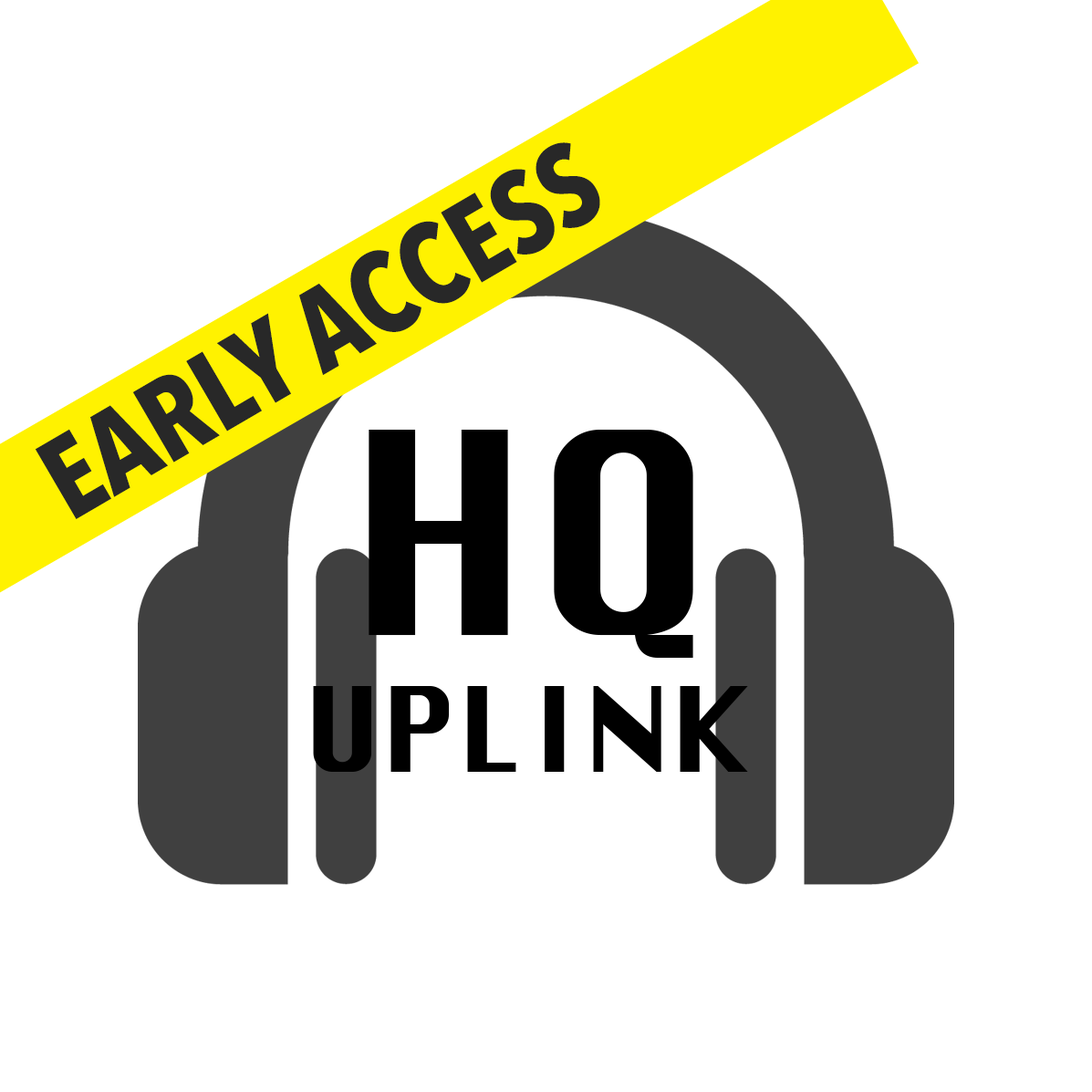
<style>
.page{position:relative;width:1092px;height:1092px;background:#ffffff}
.page>*{position:absolute;margin:0}
.t1{font:114px "AvenirNextCondensed-Bold";color:#282828}
.t2{font:114px "Krungthep";color:#000000}
.t3{font:273.7px "Krungthep";color:#000000}
</style>
<div class="page">
<p class="t1" style="left:35px;top:142px;width:565px;height:377px;rotate:-30deg">EARLY ACCESS</p>
<p class="t2" style="left:313px;top:430px;width:435px;height:342px;text-align:center"><span class="t3">HQ<br></span>UPLINK</p>
</div>
